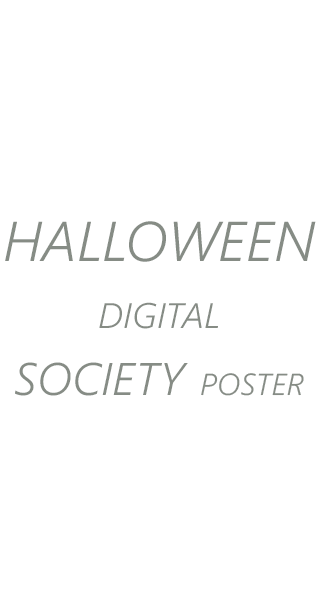
<style>
.page{position:relative;width:320px;height:600px;background:#ffffff}
.page>*{position:absolute;margin:0}
.t1{font:55.9px "SegoeUI-SemilightItalic";color:#868c85}
.t2{font:35.6px "SegoeUI-SemilightItalic";color:#868c85}
.t3{font:45.7px "SegoeUI-SemilightItalic";color:#868c85}
.t4{font:30.5px "SegoeUI-SemilightItalic";color:#868c85}
</style>
<div class="page">
<p class="t1" style="left:5px;top:221px;width:311px;height:175px;text-align:center">HALLOWEEN <span class="t2">DIGITAL <br></span><span class="t3">SOCIETY </span><span class="t4">POSTER</span></p>
</div>
